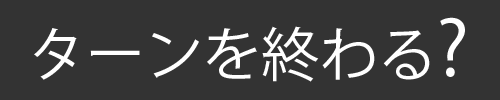
<style>
.page{position:relative;width:500px;height:100px;background:#333333}
.page>*{position:absolute;margin:0}
.t1{font:58.3px "KozGoPr6N-Regular";color:#ffffff}
.t2{font:75px "KozGoPr6N-Regular";color:#ffffff}
</style>
<div class="page">
<p class="t1" style="left:34px;top:17px;width:431px;height:65px">ターンを終わる<span class="t2">?</span></p>
</div>
